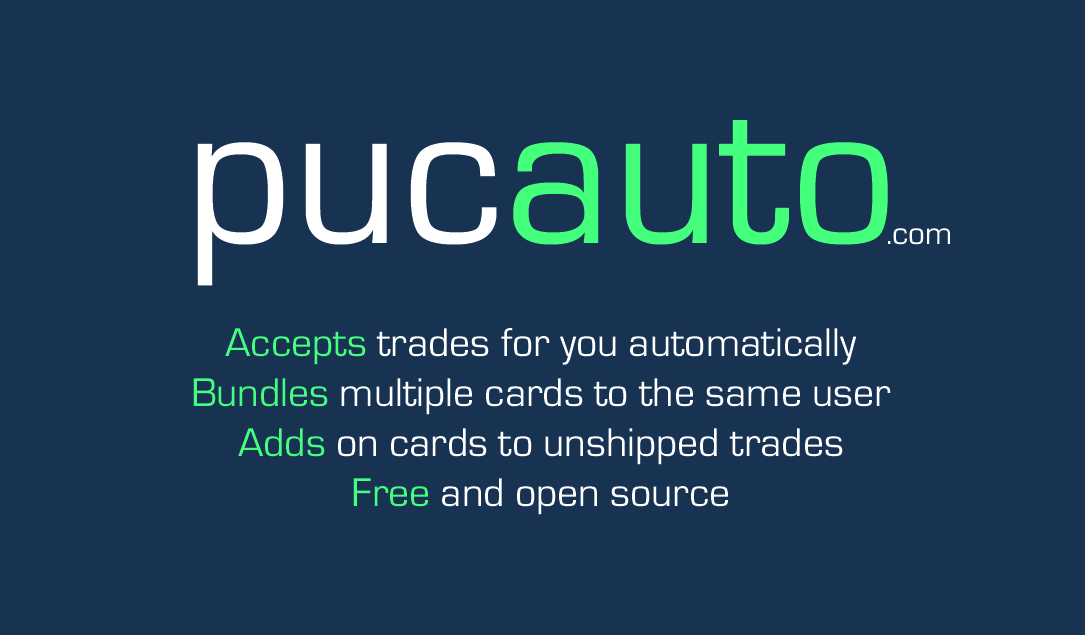
<style>
.page{position:relative;width:1085px;height:635px;background:#183252}
.page>*{position:absolute;margin:0}
.t1{font:212.5px "EurostileRegular";color:#44ff7b}
.t2{font:212.5px "EurostileRegular";color:#ffffff}
.t3{font:33.3px "EurostileRegular";color:#ffffff}
.t4{font:41.7px "EurostileRegular";color:#ffffff}
.t5{font:41.7px "EurostileRegular";color:#44ff7b}
</style>
<div class="page">
<p class="t1" style="left:197px;top:120px;width:691px;height:166px"><span class="t2">puc</span>auto</p>
<p class="t3" style="left:888px;top:228px;width:62px;height:17px">.com</p>
<p class="t4" style="left:193px;top:328px;width:698px;height:187px;text-align:center"><span class="t5">Accepts</span> trades for you automatically<br><span class="t5">Bundles</span> multiple cards to the same user<br><span class="t5">Adds</span> on cards to unshipped trades<br><span class="t5">Free</span> and open source</p>
</div>
